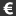
<style>
.page{position:relative;width:16px;height:16px;background:#333333}
.page>*{position:absolute;margin:0}
.t1{font:18px "MyriadPro-Bold";color:#ffffff}
</style>
<div class="page">
<p class="t1" style="left:3px;top:2px;width:10px;height:13px">€</p>
</div>
